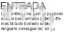
<style>
.page{position:relative;width:64px;height:32px;background:#ffffff}
.page>*{position:absolute;margin:0}
.t1{font:10px "ArialMT";letter-spacing:-0.06em;text-transform:uppercase;scale:1.05 1}
.t2{font:4.2px/5px "ArialMT";color:#737373}
</style>
<div class="page">
<p class="t1" style="left:0px;top:2px;width:46px;height:7px">entrada</p>
<p class="t2" style="left:1px;top:11px;width:62px;height:20px">Uma entrada na qual as pessoas<br>entram bem entrado tudinho ele<br>mas tá tudo borrado então <br>ninguém consegue ler, só eu</p>
</div>
